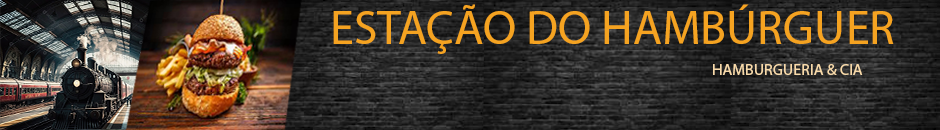
<style>
.page{position:relative;width:940px;height:130px}
.page>*{position:absolute;margin:0}
.t1{font:48px "MyriadPro-Regular";color:#f5a321}
.t2{font:16px "MyriadPro-Regular";color:#f8daaa}
</style>
<div class="page">
<p class="t1" style="left:333px;top:4px;width:561px;height:50px">ESTAÇÃO DO HAMBÚRGUER</p>
<p class="t2" style="left:713px;top:64px;width:150px;height:11px">HAMBURGUERIA &amp; CIA</p>
</div>
